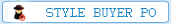
<style>
.page{position:relative;width:171px;height:24px;background:#ffffff}
.page>*{position:absolute;margin:0}
.t1{font:14px "Courier";color:#1c86c5}
</style>
<div class="page">
<p class="t1" style="left:46px;top:8px;width:110px;height:9px">STYLE BUYER PO</p>
</div>
